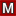
<style>
.page{position:relative;width:16px;height:16px;background:#a00000}
.page>*{position:absolute;margin:0}
.t1{font:14px "ArialMT";color:#ffffff}
</style>
<div class="page">
<p class="t1" style="left:3px;top:3px;width:10px;height:10px">M</p>
</div>
